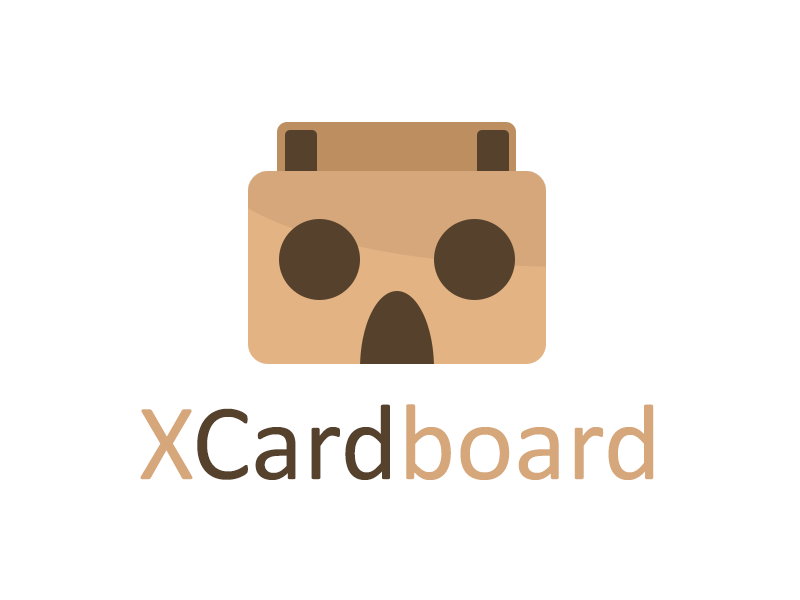
<style>
.page{position:relative;width:800px;height:600px;background:#ffffff}
.page>*{position:absolute;margin:0}
.t1{font:110px "Calibri";color:#d6a77a}
.t2{font:110px "Calibri";color:#56422c}
</style>
<div class="page">
<p class="t1" style="left:140px;top:404px;width:514px;height:76px">X<span class="t2">Card</span>board</p>
</div>
